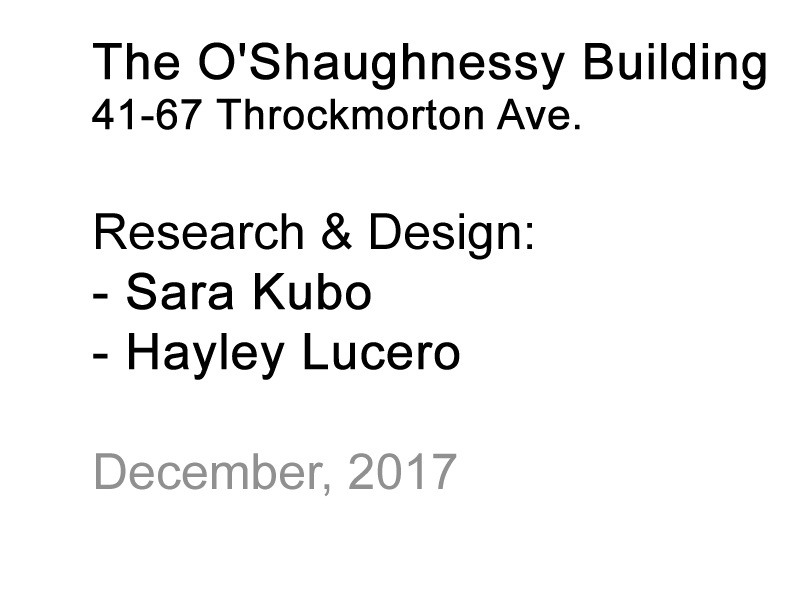
<style>
.page{position:relative;width:800px;height:600px;background:#ffffff}
.page>*{position:absolute;margin:0}
.t1{font:50px "ArialMT";color:#000000;font-weight:bold}
.t2{font:41.7px "ArialMT";color:#000000;font-weight:bold}
.t3{font:50px "ArialMT";color:#000000}
.t4{font:50px "ArialMT";color:#919090}
</style>
<div class="page">
<p class="t1" style="left:92px;top:42px;width:674px;height:455px">The O'Shaughnessy Building<br><span class="t2">41-67 Throckmorton Ave.<br></span><span class="t3"><br>Research &amp; Design:<br></span>- Sara Kubo<br>- Hayley Lucero<br><br><span class="t4">December, 2017</span></p>
</div>
